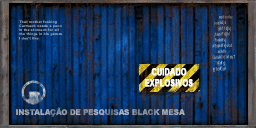
<style>
.page{position:relative;width:256px;height:128px}
.page>*{position:absolute;margin:0}
.t1{font:10px "Arial-BoldMT";letter-spacing:0.01em;color:#ffffff;font-weight:bold;scale:0.71 1}
.t2{font:8px "Arial-Black";scale:0.9 1}
</style>
<div class="page">
<p class="t1" style="left:145px;top:68px;width:48px;height:19px;text-align:center">CUIDADO<br>EXPLOSIVOS</p>
<p class="t2" style="left:16px;top:107px;width:169px;height:10px">INSTALAÇÃO DE PESQUISAS BLACK MESA</p>
</div>
